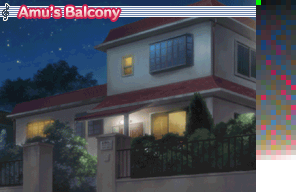
<style>
.page{position:relative;width:296px;height:192px}
.page>*{position:absolute;margin:0}
.t1{font:12px "HummingStd-E";letter-spacing:0.02em}
</style>
<div class="page">
<p class="t1" style="left:18px;top:6px;width:102px;height:14px">Amu’s Balcony</p>
</div>
